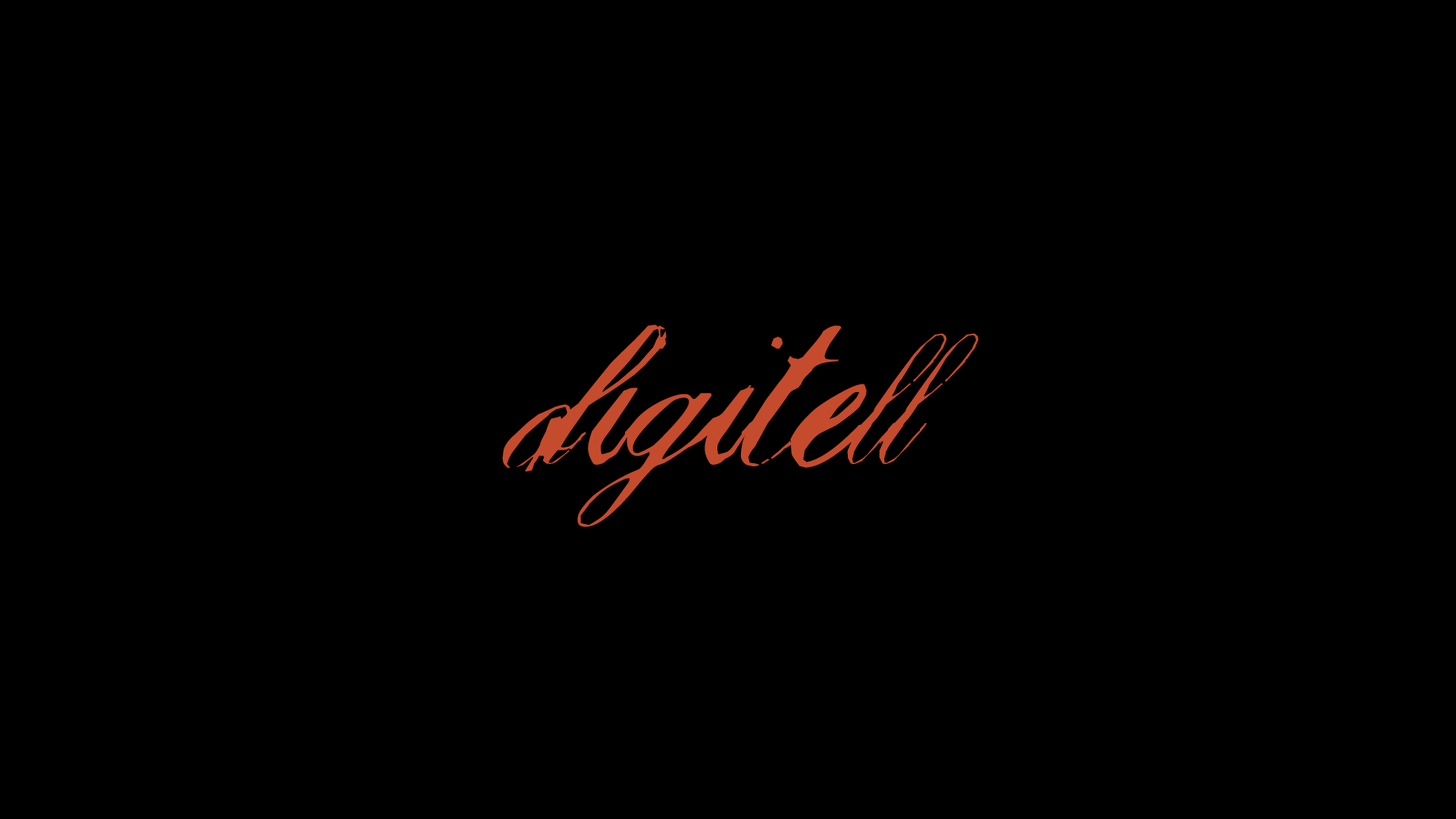
<style>
.page{position:relative;width:1456px;height:819px;background:#000000}
.page>*{position:absolute;margin:0}
.t1{font:134.9px "ChatoBandSmooth";color:#c54b2d}
</style>
<div class="page">
<p class="t1" style="left:502px;top:325px;width:477px;height:202px">digitell</p>
</div>
